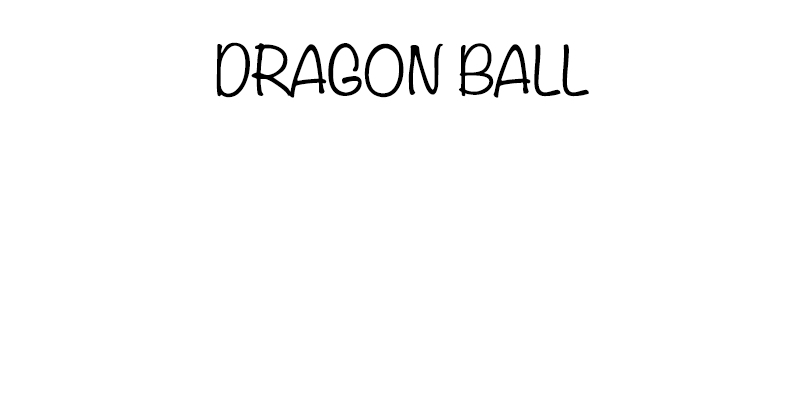
<style>
.page{position:relative;width:800px;height:400px;background:#ffffff}
.page>*{position:absolute;margin:0}
.t1{font:60px "Noteworthy-Light";color:#000000}
</style>
<div class="page">
<p class="t1" style="left:216px;top:42px;width:373px;height:56px">DRAGON BALL</p>
</div>
